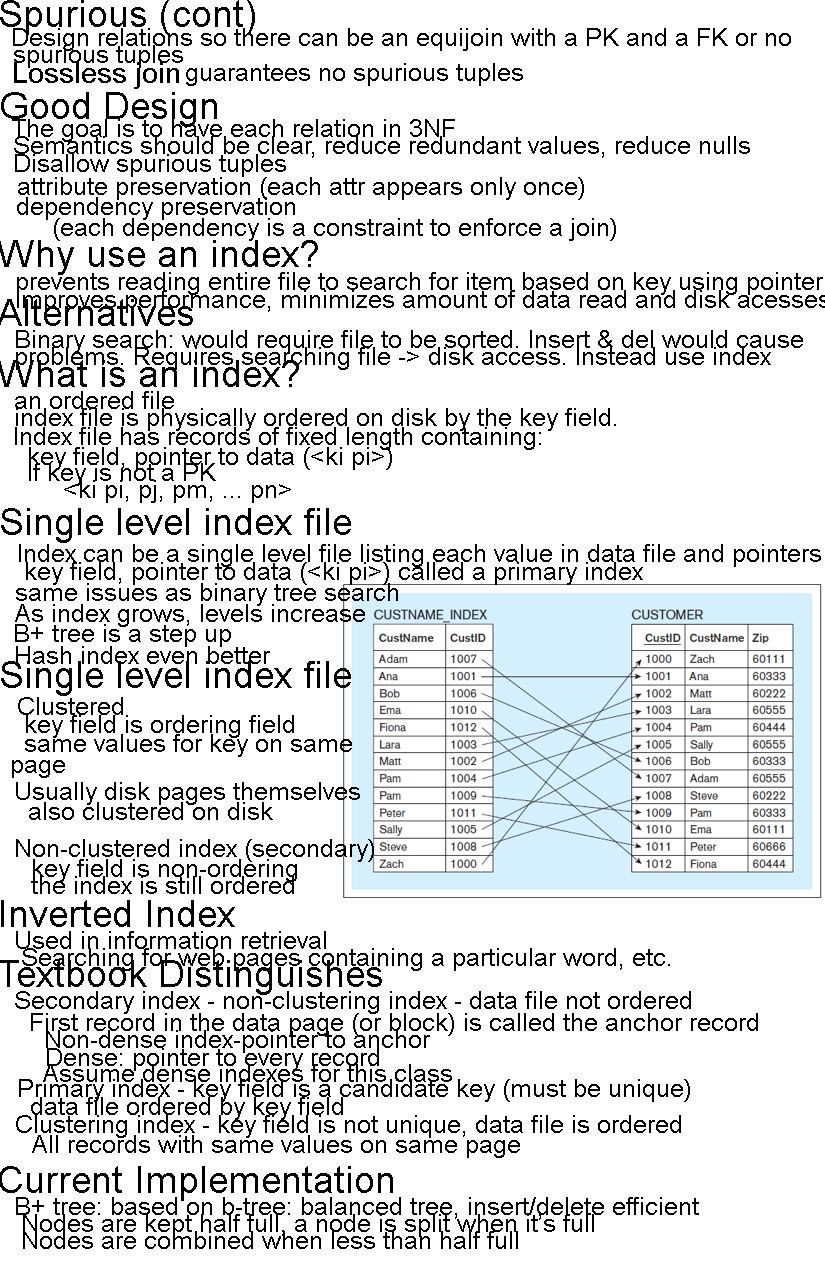
<style>
.page{position:relative;width:825px;height:1275px;background:#ffffff}
.page>*{position:absolute;margin:0}
.t1{font:37.5px "ArialMT";color:#000000}
.t2{font:25px "ArialMT";color:#000000}
.t3{font:29.2px "ArialMT";color:#000000}
.t4{font:25px/20.9px "ArialMT";color:#000000}
.t5{font:25px/16.7px "ArialMT";color:#000000}
</style>
<div class="page">
<p class="t1" style="left:0px;top:0px;width:255px;height:35px">Spurious (cont)</p>
<p class="t2" style="left:13px;top:28px;width:778px;height:23px">Design relations so there can be an equijoin with a PK and a FK or no</p>
<p class="t2" style="left:14px;top:45px;width:169px;height:23px">spurious tuples</p>
<p class="t3" style="left:14px;top:62px;width:165px;height:27px">Lossless join</p>
<p class="t2" style="left:186px;top:63px;width:337px;height:23px">guarantees no spurious tuples</p>
<p class="t1" style="left:1px;top:92px;width:216px;height:35px">Good Design</p>
<p class="t2" style="left:12px;top:119px;width:443px;height:23px">The goal is to have each relation in 3NF</p>
<p class="t2" style="left:14px;top:136px;width:736px;height:22px">Semantics should be clear, reduce redundant values, reduce nulls</p>
<p class="t2" style="left:15px;top:154px;width:271px;height:23px">Disallow spurious tuples</p>
<p class="t2" style="left:18px;top:177px;width:566px;height:23px">attribute preservation (each attr appears only once)</p>
<p class="t4" style="left:17px;top:197px;width:599px;height:44px">dependency preservation <br> (each dependency is a constraint to enforce a join)</p>
<p class="t2" style="left:17px;top:272px;width:806px;height:23px">prevents reading entire file to search for item based on key using pointer</p>
<p class="t5" style="left:16px;top:330px;width:787px;height:40px">Binary search: would require file to be sorted. Insert &amp; del would cause<br>problems. Requires searching file -&gt; disk access. Instead use index</p>
<p class="t5" style="left:15px;top:391px;width:601px;height:40px">an ordered file<br>index file is physically ordered on disk by the key field.</p>
<p class="t2" style="left:15px;top:427px;width:526px;height:23px">Index file has records of fixed length containing:</p>
<p class="t5" style="left:29px;top:447px;width:363px;height:56px">key field, pointer to data (&lt;ki pi&gt;)<br>If key is not a PK<br> &lt;ki pi, pj, pm, ... pn&gt;</p>
<p class="t1" style="left:1px;top:508px;width:350px;height:35px">Single level index file</p>
<p class="t2" style="left:19px;top:544px;width:802px;height:23px">Index can be a single level file listing each value in data file and pointers</p>
<p class="t2" style="left:26px;top:562px;width:617px;height:23px">key field, pointer to data (&lt;ki pi&gt;) called a primary index</p>
<p class="t2" style="left:16px;top:583px;width:382px;height:23px">same issues as binary tree search</p>
<p class="t2" style="left:15px;top:604px;width:350px;height:23px">As index grows, levels increase</p>
<p class="t2" style="left:15px;top:624px;width:216px;height:23px">B+ tree is a step up</p>
<p class="t2" style="left:16px;top:646px;width:254px;height:18px">Hash index even better</p>
<p class="t1" style="left:1px;top:661px;width:350px;height:35px">Single level index file</p>
<p class="t2" style="left:18px;top:697px;width:105px;height:18px">Clustered</p>
<p class="t2" style="left:26px;top:715px;width:268px;height:23px">key field is ordering field</p>
<p class="t4" style="left:12px;top:734px;width:340px;height:44px">same values for key on same <br>page</p>
<p class="t2" style="left:16px;top:782px;width:344px;height:23px">Usually disk pages themselves</p>
<p class="t2" style="left:29px;top:802px;width:244px;height:18px">also clustered on disk</p>
<p class="t2" style="left:16px;top:839px;width:358px;height:23px">Non-clustered index (secondary)</p>
<p class="t2" style="left:33px;top:859px;width:264px;height:23px">key field is non-ordering</p>
<p class="t2" style="left:31px;top:876px;width:263px;height:18px">the index is still ordered</p>
<p class="t1" style="left:1px;top:900px;width:234px;height:27px">Inverted Index</p>
<p class="t5" style="left:16px;top:931px;width:654px;height:40px">Used in information retrieval<br> Searching for web pages containing a particular word, etc.</p>
<p class="t1" style="left:0px;top:960px;width:382px;height:35px">Textbook Distinguishes</p>
<p class="t2" style="left:15px;top:991px;width:676px;height:23px">Secondary index - non-clustering index - data file not ordered</p>
<p class="t2" style="left:31px;top:1013px;width:727px;height:23px">First record in the data page (or block) is called the anchor record</p>
<p class="t2" style="left:46px;top:1030px;width:384px;height:23px">Non-dense index-pointer to anchor</p>
<p class="t2" style="left:47px;top:1048px;width:332px;height:23px">Dense: pointer to every record</p>
<p class="t2" style="left:43px;top:1064px;width:409px;height:18px">Assume dense indexes for this class</p>
<p class="t2" style="left:19px;top:1079px;width:671px;height:23px">Primary index - key field is a candidate key (must be unique)</p>
<p class="t2" style="left:31px;top:1097px;width:312px;height:23px">data file ordered by key field</p>
<p class="t2" style="left:16px;top:1115px;width:665px;height:23px">Clustering index - key field is not unique, data file is ordered</p>
<p class="t2" style="left:32px;top:1135px;width:488px;height:23px">All records with same values on same page</p>
<p class="t1" style="left:0px;top:1166px;width:393px;height:35px">Current Implementation</p>
<p class="t5" style="left:16px;top:1197px;width:683px;height:52px">B+ tree: based on b-tree: balanced tree, insert/delete efficient<br> Nodes are kept half full, a node is split when it’s full<br> Nodes are combined when less than half full</p>
</div>
